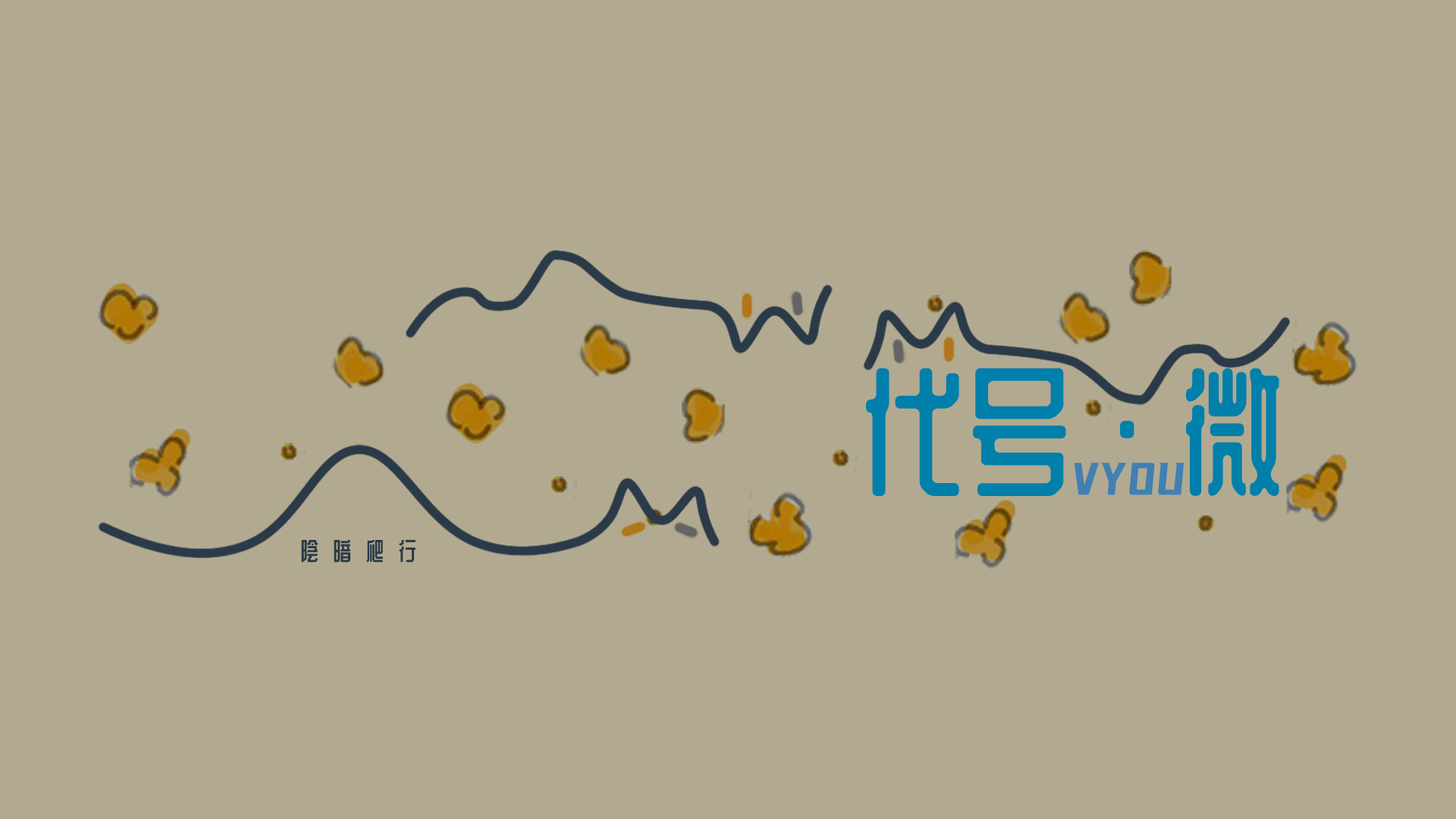
<style>
.page{position:relative;width:1456px;height:819px;background:#b2aa90}
.page>*{position:absolute;margin:0}
.t1{font:139.3px "WD-XLLubrifontSC-Regular";color:#0080aa}
.t2{font:56.6px "YouSheBiaoTiHei";color:#4080b2;scale:0.67 1}
.t3{font:24.3px "WD-XLLubrifontSC-Regular";letter-spacing:0.2em;color:#2b3a49}
</style>
<div class="page">
<p class="t1" style="left:866px;top:368px;width:413px;height:129px">代号·微</p>
<p class="t2" style="left:1074px;top:463px;width:111px;height:32px">VYOU</p>
<p class="t3" style="left:301px;top:540px;width:115px;height:23px">陰 暗 爬 行</p>
</div>
